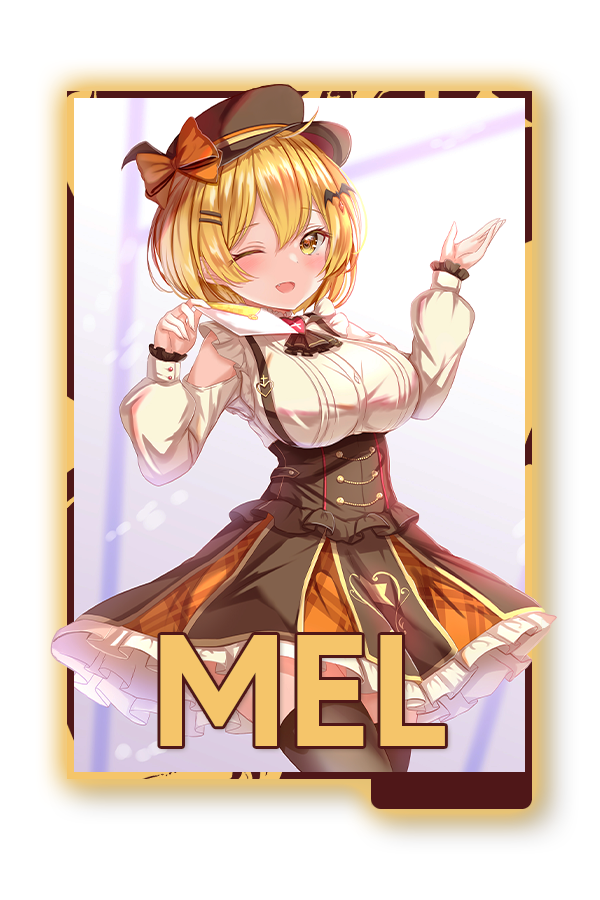
<style>
.page{position:relative;width:600px;height:900px;background:#ffffff}
.page>*{position:absolute;margin:0}
.t1{font:158.8px "MADETOMMY-Medium";color:#f5c56a}
</style>
<div class="page">
<p class="t1" style="left:160px;top:635px;width:285px;height:111px">MEL</p>
</div>
